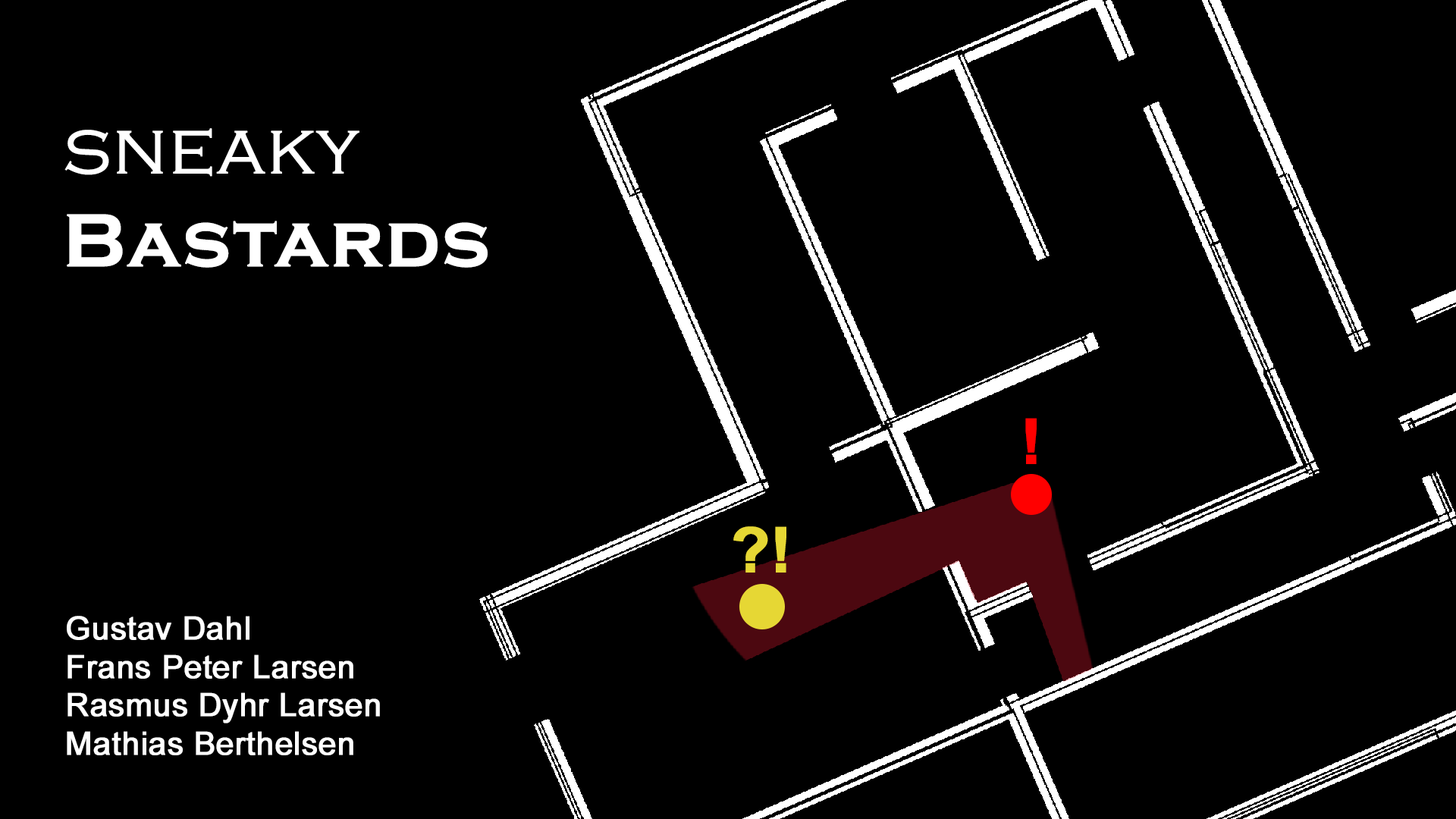
<style>
.page{position:relative;width:1456px;height:819px;background:#000000}
.page>*{position:absolute;margin:0}
.t1{font:77.3px "CopperplateGothic-Bold";color:#ffffff;font-weight:bold}
.t2{font:77.3px "CopperplateGothic-Light";color:#ffffff;font-weight:bold}
.t3{font:62.7px "Arial-BoldMT";color:#ff0000;font-weight:bold}
.t4{font:62.7px "Arial-BoldMT";color:#e6d734;font-weight:bold}
.t5{font:32.1px "ArialMT";color:#ffffff;font-weight:bold}
</style>
<div class="page">
<p class="t1" style="left:64px;top:128px;width:424px;height:140px"><span class="t2">sneaky<br></span>Bastards</p>
<p class="t3" style="left:1025px;top:418px;width:12px;height:46px">!</p>
<p class="t4" style="left:733px;top:526px;width:53px;height:47px">?!</p>
<p class="t5" style="left:67px;top:616px;width:313px;height:139px">Gustav Dahl<br>Frans Peter Larsen<br>Rasmus Dyhr Larsen<br>Mathias Berthelsen</p>
</div>
